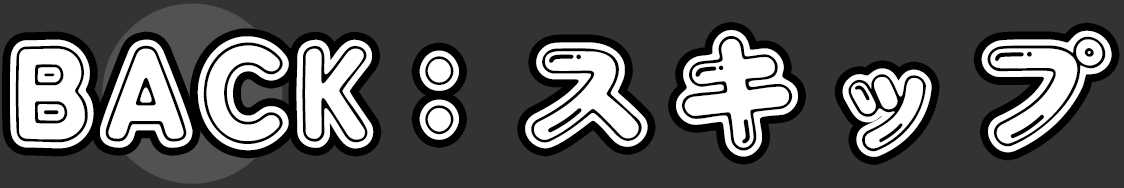
<style>
.page{position:relative;width:1124px;height:188px;background:#333333}
.page>*{position:absolute;margin:0}
.t1{font:150px "DokiDokiFantasia";color:#ffffff}
</style>
<div class="page">
<p class="t1" style="left:419px;top:30px;width:693px;height:127px">：スキップ</p>
</div>
